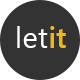
<style>
.page{position:relative;width:80px;height:80px;background:#333333}
.page>*{position:absolute;margin:0}
.t1{font:29.2px "SegoeUI";letter-spacing:0.01em;color:#ffffff}
.t2{font:29.2px "SegoeUI-SemiBold";letter-spacing:0.01em;color:#f0b518}
</style>
<div class="page">
<p class="t1" style="left:17px;top:26px;width:49px;height:22px">let<span class="t2">it</span></p>
</div>
